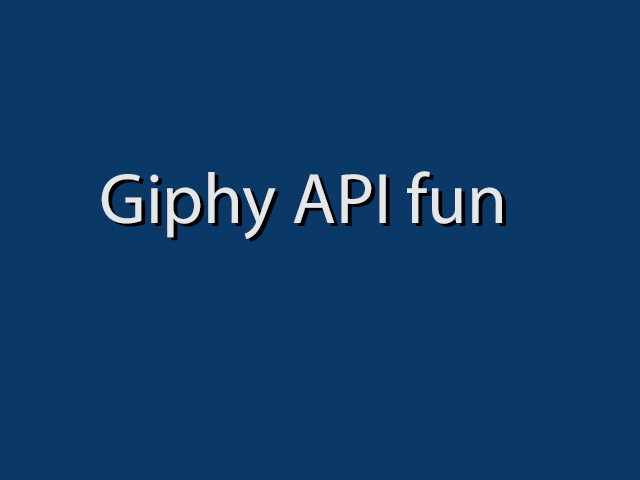
<style>
.page{position:relative;width:640px;height:480px;background:#0b3967}
.page>*{position:absolute;margin:0}
.t1{font:72px "MyriadPro-Regular";color:#e4e6e8}
</style>
<div class="page">
<p class="t1" style="left:101px;top:171px;width:401px;height:68px">Giphy API fun</p>
</div>
